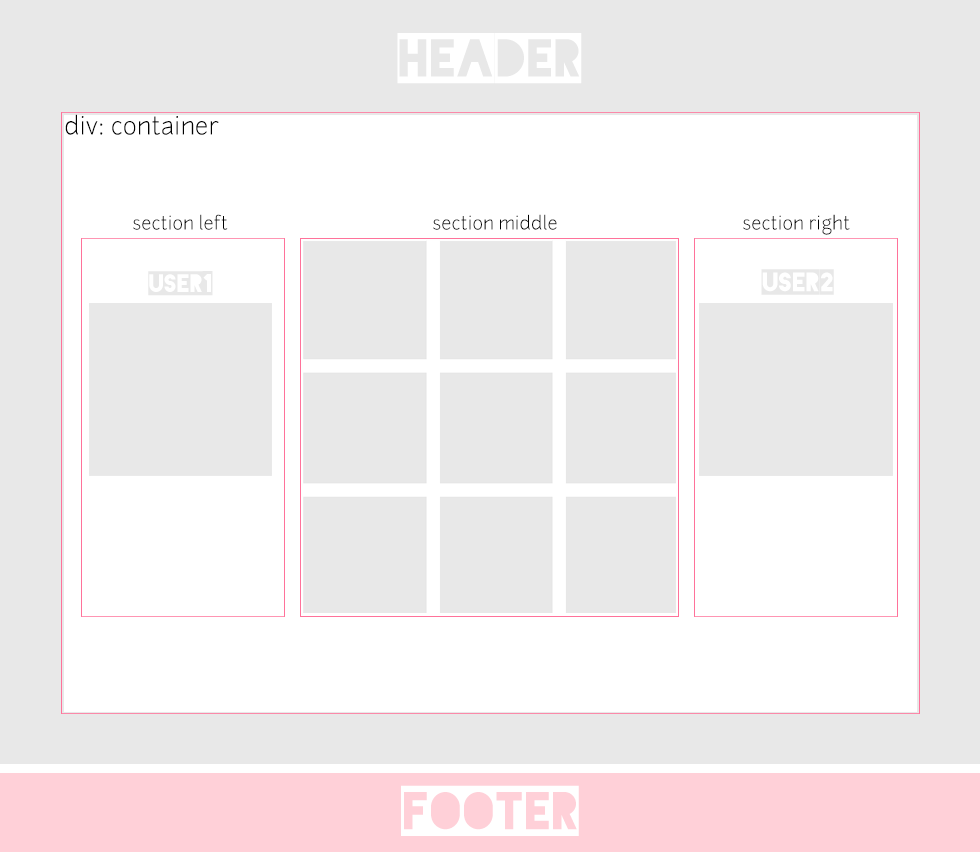
<style>
.page{position:relative;width:980px;height:852px;background:#e8e8e8}
.page>*{position:absolute;margin:0}
.t1{font:60px "Blackout-2AM";letter-spacing:0.01em;color:#ffffff}
.t2{font:24px "Junction-Light";letter-spacing:0.01em;color:#000000}
.t3{font:18px "Junction-Light";letter-spacing:0.01em;color:#000000}
.t4{font:30.6px "Blackout-2AM";letter-spacing:0.01em;color:#e8e8e8}
.t5{font:28.8px "Blackout-2AM";letter-spacing:0.01em;color:#e8e8e8}
</style>
<div class="page">
<p class="t1" style="left:397px;top:33px;width:185px;height:51px">header</p>
<p class="t2" style="left:65px;top:114px;width:154px;height:21px">div: container</p>
<p class="t3" style="left:133px;top:214px;width:95px;height:16px">section left</p>
<p class="t3" style="left:433px;top:214px;width:124px;height:16px">section middle</p>
<p class="t3" style="left:743px;top:214px;width:107px;height:21px">section right</p>
<p class="t4" style="left:761px;top:269px;width:73px;height:26px">user2</p>
<p class="t5" style="left:148px;top:271px;width:65px;height:25px">user1</p>
<p class="t1" style="left:401px;top:785px;width:178px;height:51px">footer</p>
</div>
